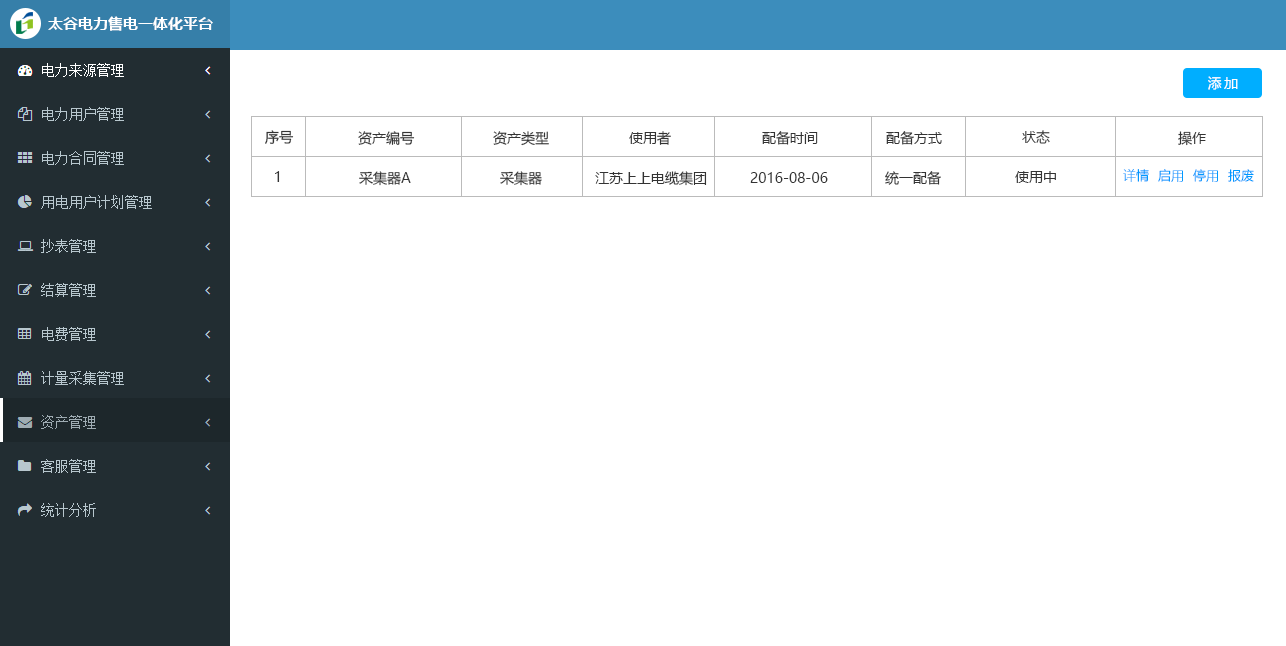
<style>
.page{position:relative;width:1286px;height:646px;background:#ffffff}
.page>*{position:absolute;margin:0}
.t1{font:15px "MicrosoftYaHei-Bold";color:#ffffff}
.t2{font:14px "MicrosoftYaHei";letter-spacing:0.16em;color:#ffffff}
.t3{font:14px "MicrosoftYaHei";color:#333333}
.t4{font:13px "MicrosoftYaHeiLight";color:#0099ff}
</style>
<div class="page">
<p class="t1" style="left:48px;top:16px;width:165px;height:15px">太谷电力售电一体化平台</p>
<p class="t2" style="left:1208px;top:76px;width:30px;height:14px">添加</p>
<p class="t3" style="left:265px;top:130px;width:29px;height:14px">序号</p>
<p class="t3" style="left:358px;top:131px;width:57px;height:14px">资产编号</p>
<p class="t3" style="left:493px;top:131px;width:56px;height:15px">资产类型</p>
<p class="t3" style="left:629px;top:131px;width:42px;height:14px">使用者</p>
<p class="t3" style="left:762px;top:131px;width:56px;height:14px">配备时间</p>
<p class="t3" style="left:886px;top:131px;width:56px;height:14px">配备方式</p>
<p class="t3" style="left:1022px;top:130px;width:28px;height:14px">状态</p>
<p class="t3" style="left:1178px;top:131px;width:28px;height:15px">操作</p>
<p class="t3" style="left:275px;top:171px;width:5px;height:11px">1</p>
<p class="t3" style="left:359px;top:171px;width:52px;height:15px">采集器A</p>
<p class="t3" style="left:500px;top:171px;width:42px;height:15px">采集器</p>
<p class="t3" style="left:595px;top:171px;width:112px;height:15px">江苏上上电缆集团</p>
<p class="t3" style="left:750px;top:172px;width:78px;height:11px">2016-08-06</p>
<p class="t3" style="left:885px;top:171px;width:56px;height:14px">统一配备</p>
<p class="t3" style="left:1015px;top:171px;width:41px;height:12px">使用中</p>
<p class="t4" style="left:1123px;top:169px;width:26px;height:13px">详情</p>
<p class="t4" style="left:1158px;top:169px;width:25px;height:13px">启用</p>
<p class="t4" style="left:1193px;top:169px;width:25px;height:13px">停用</p>
<p class="t4" style="left:1228px;top:169px;width:26px;height:13px">报废</p>
</div>
